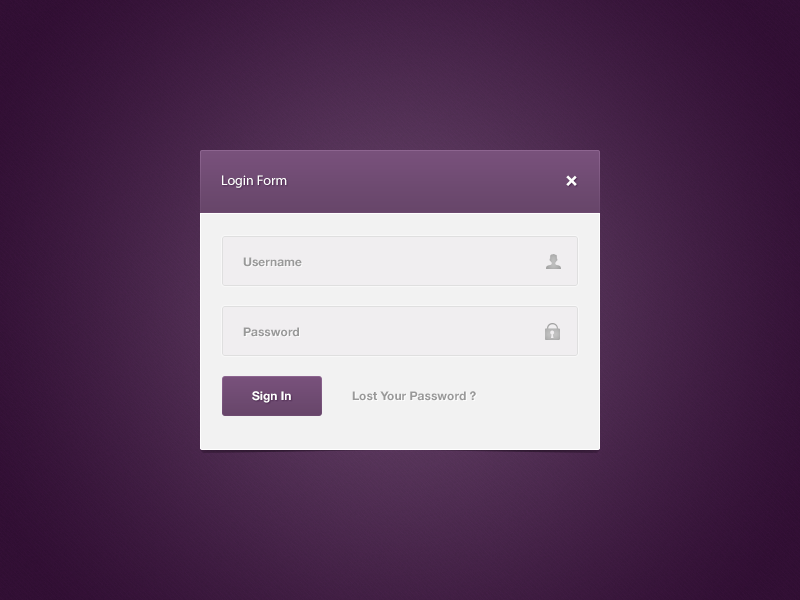
<style>
.page{position:relative;width:800px;height:600px}
.page>*{position:absolute;margin:0}
.t1{font:14px "MyriadPro-Regular";color:#ffffff}
.t2{font:24px "HelveticaNeue-Bold";color:#ffffff}
.t3{font:12px "HelveticaNeue-Bold";color:#999999}
.t4{font:12px "HelveticaNeue-Bold";color:#ffffff}
</style>
<div class="page">
<p class="t1" style="left:222px;top:175px;width:65px;height:13px">Login Form</p>
<p class="t2" style="left:566px;top:175px;width:11px;height:11px;rotate:45deg">+</p>
<p class="t3" style="left:243px;top:257px;width:59px;height:10px">Username</p>
<p class="t3" style="left:243px;top:327px;width:56px;height:10px">Password</p>
<p class="t4" style="left:252px;top:391px;width:39px;height:12px">Sign In</p>
<p class="t3" style="left:352px;top:391px;width:124px;height:10px">Lost Your Password ?</p>
</div>
